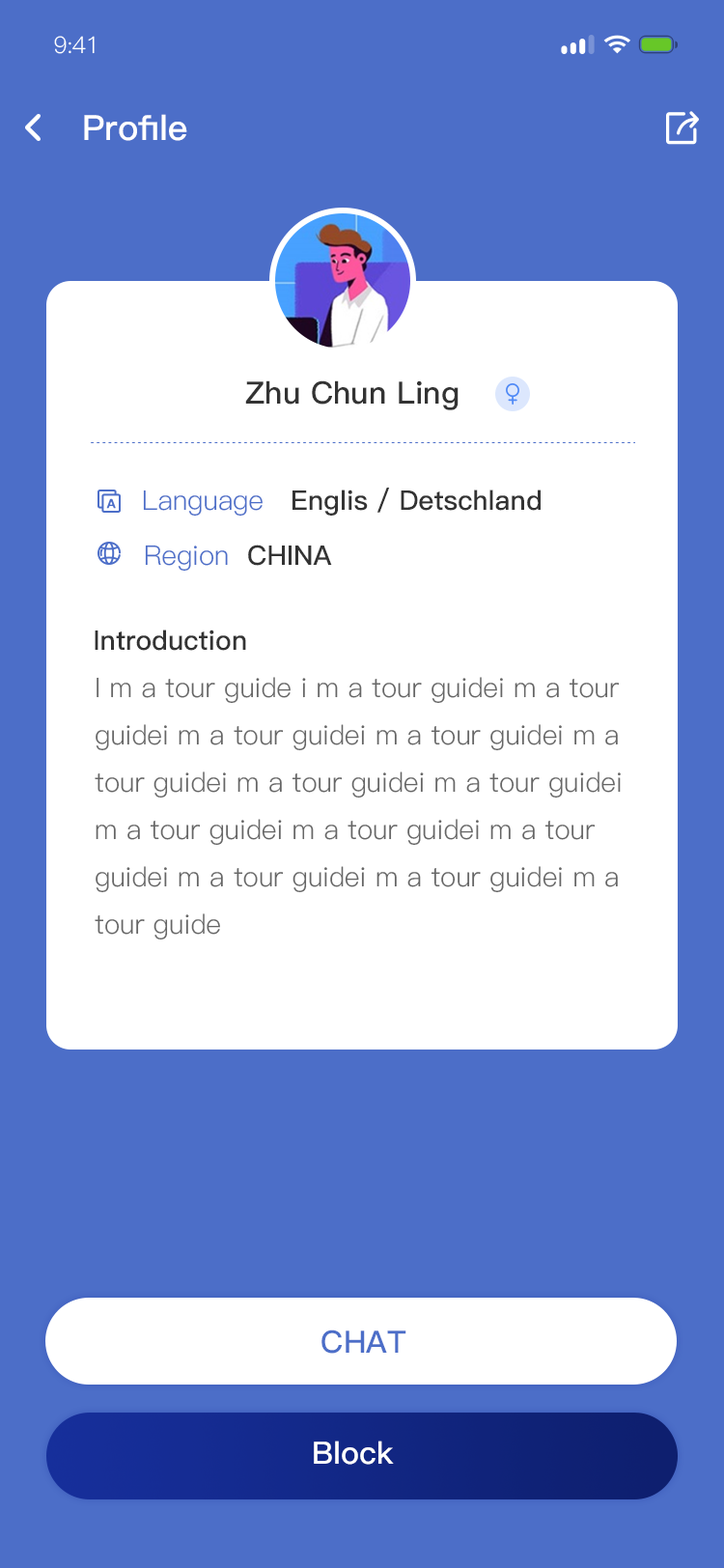
<style>
.page{position:relative;width:724px;height:1568px;background:#ffffff}
.page>*{position:absolute;margin:0}
.t1{font:23.2px "PingFang-SC-Regular";letter-spacing:-0.025em;color:#ffffff}
.t2{font:34.8px "PingFang-SC-Bold";color:#ffffff}
.t3{font:30.9px "PingFang-SC-Bold";color:#333333}
.t4{font:30.9px "PingFang-SC-Bold";color:#333333;text-transform:uppercase}
.t5{font:27px "PingFang-SC-Bold";color:#333333}
.t6{font:27px "PingFang-SC-Regular";color:#4c6ec8;text-transform:uppercase}
.t7{font:27px "PingFang-SC-Regular";color:#4c6ec8}
.t8{font:27px "PingFang-SC-Bold";color:#333333;text-transform:uppercase}
.t9{font:27px "PingFang-SC-Regular";color:#666666}
.t10{font:27px "PingFang-SC-Regular";color:#666666;text-transform:uppercase}
.t11{font:30.9px "PingFang-SC-Bold";color:#4c6ec8;text-transform:uppercase}
.t12{font:30.9px "PingFang-SC-Bold";color:#ffffff}
</style>
<div class="page">
<p class="t1" style="left:54px;top:36px;width:41px;height:18px">9:41</p>
<p class="t2" style="left:84px;top:114px;width:103px;height:27px">Profile</p>
<p class="t3" style="left:245px;top:380px;width:214px;height:30px"><span class="t4">z</span>hu <span class="t4">c</span>hun <span class="t4">l</span>ing</p>
<p class="t5" style="left:143px;top:488px;width:398px;height:29px"><span class="t6">l</span><span class="t7">anguage</span>   Englis / Detschland</p>
<p class="t7" style="left:145px;top:545px;width:187px;height:27px">Region  <span class="t8">china</span></p>
<p class="t5" style="left:95px;top:630px;width:151px;height:21px">Introduction</p>
<p class="t9" style="left:95px;top:677px;width:526px;height:263px"><span class="t10">i</span> m a tour guide i m a tour guidei m a tour guidei m a tour guidei m a tour guidei m a tour guidei m a tour guidei m a tour guidei m a tour guidei m a tour guidei m a tour guidei m a tour guidei m a tour guidei m a tour guide</p>
<p class="t11" style="left:322px;top:1330px;width:84px;height:24px">Chat</p>
<p class="t12" style="left:314px;top:1441px;width:80px;height:24px">Block</p>
</div>
